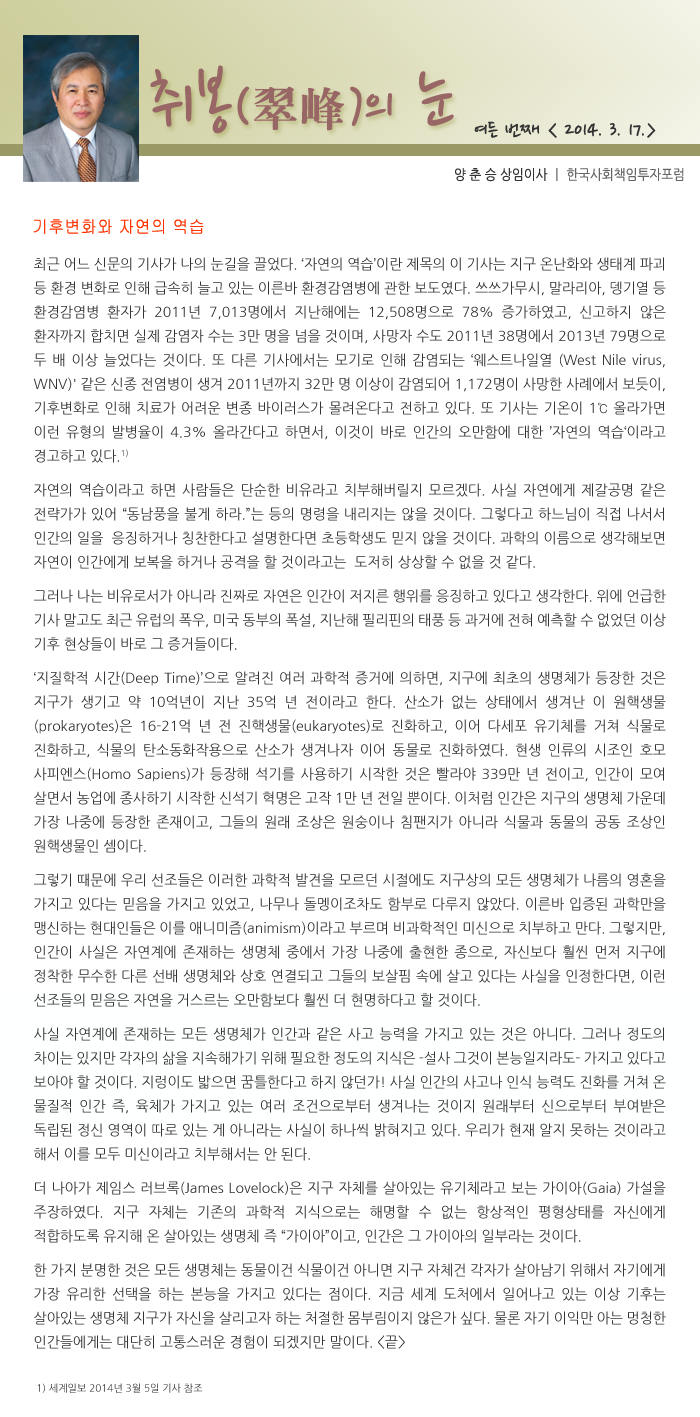
<style>
.page{position:relative;width:700px;height:1417px;background:#ffffff}
.page>*{position:absolute;margin:0}
.t1{font:77.5px "NanumPen";color:#996666}
.t2{font:60px "NanumPen";color:#996666}
.t3{font:48px "H2mjrE";color:#996666}
.t4{font:24px "NanumPen";color:#333333}
.t5{font:14px "NanumGothic";color:#666666;scale:0.9 1}
.t6{font:14px "NanumGothic";color:#333333;scale:0.9 1}
.t7{font:18px "Gulim";color:#ff3300;scale:0.9 1}
.t8{font:14px/24px "NanumGothic";color:#333333}
.t9{font:14px/10px "NanumGothic";color:#333333}
.t10{font:10px/24px "NanumGothic";color:#333333}
</style>
<div class="page">
<p class="t1" style="left:150px;top:65px;width:304px;height:69px">취봉<span class="t2">(</span><span class="t3">翠峰</span><span class="t2">)</span><span class="t2">의</span> 눈</p>
<p class="t4" style="left:474px;top:121px;width:182px;height:17px">여든 번째 &lt; 2014. 3. 17.&gt;</p>
<p class="t5" style="left:455px;top:168px;width:229px;height:14px"><span class="t6">양 춘 승 상임이사 </span>ㅣ 한국사회책임투자포럼</p>
<p class="t7" style="left:33px;top:219px;width:171px;height:15px">기후변화와 자연의 역습</p>
<p class="t8" style="left:33px;top:257px;width:633px;height:1136px;text-align:justify">최근 어느 신문의 기사가 나의 눈길을 끌었다. ‘자연의 역습’이란 제목의 이 기사는 지구 온난화와 생태계 파괴 등 환경 변화로 인해 급속히 늘고 있는 이른바 환경감염병에 관한 보도였다. 쓰쓰가무시, 말라리아, 뎅기열 등 환경감염병 환자가 2011년 7,013명에서 지난해에는 12,508명으로 78% 증가하였고, 신고하지 않은 환자까지 합치면 실제 감염자 수는 3만 명을 넘을 것이며, 사망자 수도 2011년 38명에서 2013년 79명으로 두 배 이상 늘었다는 것이다. 또 다른 기사에서는 모기로 인해 감염되는 ‘웨스트나일열 (West Nile virus, WNV)' 같은 신종 전염병이 생겨 2011년까지 32만 명 이상이 감염되어 1,172명이 사망한 사례에서 보듯이, 기후변화로 인해 치료가 어려운 변종 바이러스가 몰려온다고 전하고 있다. 또 기사는 기온이 1℃ 올라가면 이런 유형의 발병율이 4.3% 올라간다고 하면서, 이것이 바로 인간의 오만함에 대한 ’자연의 역습‘이라고 경<span class="t9">고하고 있다.1)<br><br>자연의 역습</span>이라고 하면 사람들은 단순한 비유라고 치부해버릴지 모르겠다. 사실 자연에게 제갈공명 같은 전략가가 있어 “동남풍을 불게 하라.”는 등의 명령을 내리지는 않을 것이다. 그렇다고 하느님이 직접 나서서 인간의 일을  응징하거나 칭찬한다고 설명한다면 초등학생도 믿지 않을 것이다. 과학의 이름으로 생각해보면 자연이 인간에게 보<span class="t9">복을 하거나 공격을 할 것이라고는  도저히 상상할 수 없을 것 같다.<br><br>그러나 나는 비유로서가 아니라 진</span>짜로 자연은 인간이 저지른 행위를 응징하고 있다고 생각한다. 위에 언급한 기사 말고도 최근 유럽의 폭우, 미국 동부의 폭설, 지난해 필리핀의 태풍 등 과거에 전혀 예측할 수 없었던 이상 기후 현상들이 바로 그 증거<span class="t9">들이다. <br><br>‘지질학적 시간(Deep Time)’으로 알려</span>진 여러 과학적 증거에 의하면, 지구에 최초의 생명체가 등장한 것은 지구가 생기고 약 10억년이 지난 35억 년 전이라고 한다. 산소가 없는 상태에서 생겨난 이 원핵생물(prokaryotes)은 16-21억 년 전 진핵생물(eukaryotes)로 진화하고, 이어 다세포 유기체를 거쳐 식물로 진화하고, 식물의 탄소동화작용으로 산소가 생겨나자 이어 동물로 진화하였다. 현생 인류의 시조인 호모 사피엔스(Homo Sapiens)가 등장해 석기를 사용하기 시작한 것은 빨라야 339만 년 전이고, 인간이 모여 살면서 농업에 종사하기 시작한 신석기 혁명은 고작 1만 년 전일 뿐이다. 이처럼 인간은 지구의 생명체 가운데 가장 나중에 등장한 존재이고, 그들의 원래 조상은 원숭이나 침팬지가 아니라 식물과 동물의 공동 조상인 원핵생<span class="t9">물인 셈이다.<br><br>그렇기 때문에 우리 </span>선조들은 이러한 과학적 발견을 모르던 시절에도 지구상의 모든 생명체가 나름의 영혼을 가지고 있다는 믿음을 가지고 있었고, 나무나 돌멩이조차도 함부로 다루지 않았다. 이른바 입증된 과학만을 맹신하는 현대인들은 이를 애니미즘(animism)이라고 부르며 비과학적인 미신으로 치부하고 만다. 그렇지만, 인간이 사실은 자연계에 존재하는 생명체 중에서 가장 나중에 출현한 종으로, 자신보다 훨씬 먼저 지구에 정착한 무수한 다른 선배 생명체와 상호 연결되고 그들의 보살핌 속에 살고 있다는 사실을 인정한다면, 이런 선조들의 믿음은 자연을 거스르는 오<span class="t9">만함보다 훨씬 더 현명하다고 할 것이다. <br><br>사실 자연계에 존재하는 모든 생명체가 인간과 같은 사</span>고 능력을 가지고 있는 것은 아니다. 그러나 정도의 차이는 있지만 각자의 삶을 지속해가기 위해 필요한 정도의 지식은 -설사 그것이 본능일지라도- 가지고 있다고 보아야 할 것이다. 지렁이도 밟으면 꿈틀한다고 하지 않던가! 사실 인간의 사고나 인식 능력도 진화를 거쳐 온 물질적 인간 즉, 육체가 가지고 있는 여러 조건으로부터 생겨나는 것이지 원래부터 신으로부터 부여받은 독립된 정신 영역이 따로 있는 게 아니라는 사실이 하나씩 밝혀지고 있다. 우리가 현재 알지 못하는 것이라고 해서 이를 모두 미신이라고 치부<span class="t9">해서는 안 된다. <br><br>더 나아가 제임스 러브록(James Lo</span>velock)은 지구 자체를 살아있는 유기체라고 보는 가이아(Gaia) 가설을 주장하였다. 지구 자체는 기존의 과학적 지식으로는 해명할 수 없는 항상적인 평형상태를 자신에게 적합하도록 유지해 온 살아있는 생명체 즉 “가이아<span class="t9">”이고, 인간은 그 가이아의 일부라는 것이다. <br><br>한 가지 분명한 것은 모든 생명체는 동물이건 식물이건 아니면 지구</span> 자체건 각자가 살아남기 위해서 자기에게 가장 유리한 선택을 하는 본능을 가지고 있다는 점이다. 지금 세계 도처에서 일어나고 있는 이상 기후는 살아있는 생명체 지구가 자신을 살리고자 하는 처절한 몸부림이지 않은가 싶다. 물론 자기 이익만 아는 멍청한 인간들에게는 대단히 고통스러운 경험이 되겠지만 말이다. &lt;끝&gt;<br><br><span class="t10"> 1) 세계일보 2014년 3월 5일 기사 참조</span></p>
</div>
